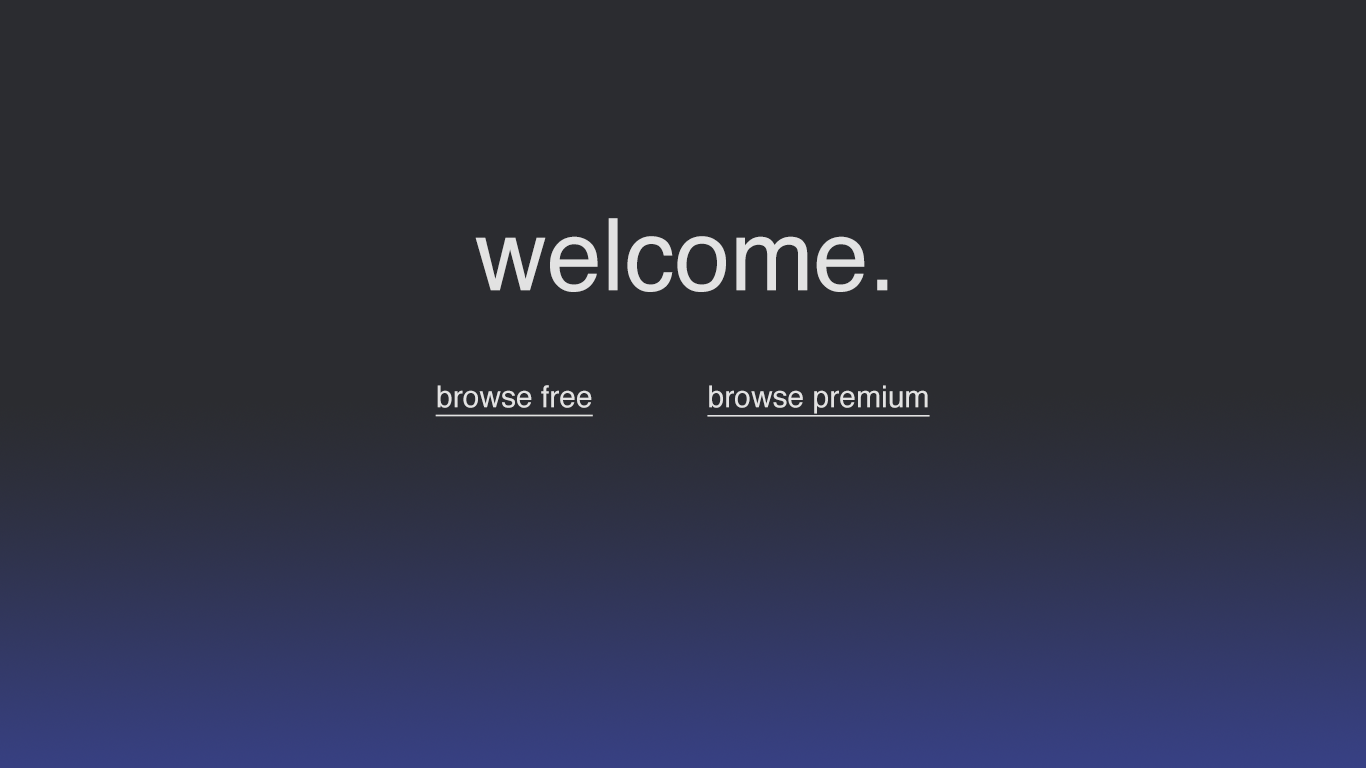
<style>
.page{position:relative;width:1366px;height:768px;background:#2b2c30}
.page>*{position:absolute;margin:0}
.t1{font:100px "Helvetica";color:#e2e2e2}
.t2{font:30px "Helvetica";color:#e2e2e2;text-decoration:underline}
</style>
<div class="page">
<p class="t1" style="left:475px;top:218px;width:413px;height:74px">welcome.</p>
<p class="t2" style="left:435px;top:385px;width:158px;height:32px">browse free</p>
<p class="t2" style="left:707px;top:385px;width:223px;height:32px">browse premium</p>
</div>
